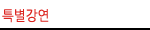
<style>
.page{position:relative;width:150px;height:30px;background:#ffffff}
.page>*{position:absolute;margin:0}
.t1{font:14px "NanumGothic";color:#dc241f;scale:0.9 1}
</style>
<div class="page">
<p class="t1" style="left:2px;top:9px;width:47px;height:14px">특별강연</p>
</div>
